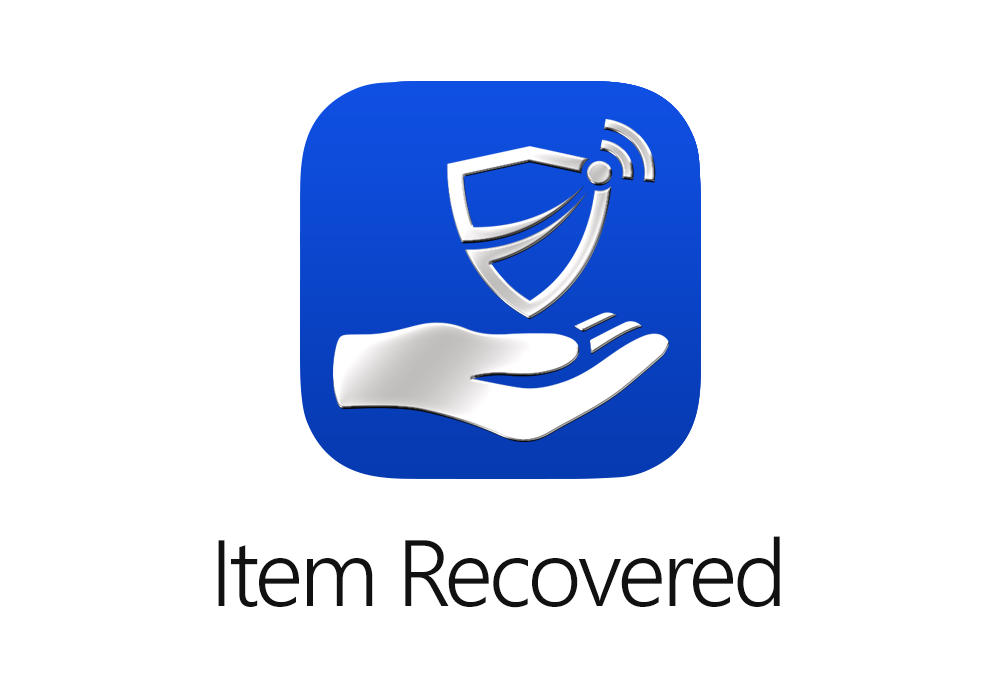
<style>
.page{position:relative;width:1000px;height:700px;background:#ffffff}
.page>*{position:absolute;margin:0}
.t1{font:94px "SegoeUI-Semilight";letter-spacing:-0.04em;color:#111111}
</style>
<div class="page">
<p class="t1" style="left:218px;top:536px;width:562px;height:72px">Item Recovered</p>
</div>
